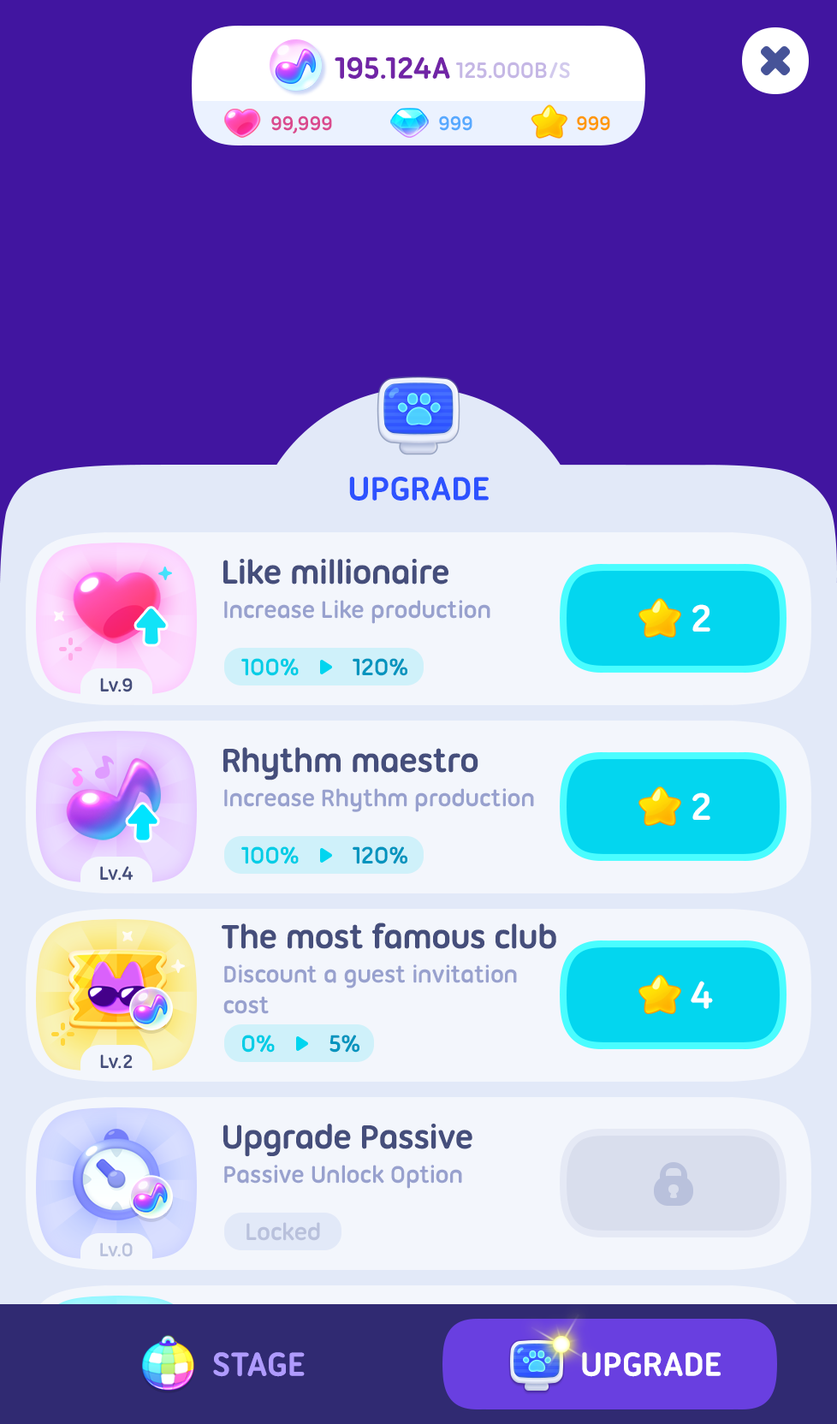
<style>
.page{position:relative;width:837px;height:1424px;background:#f3f6fc}
.page>*{position:absolute;margin:0}
.t1{font:36px "UbuntuTitling-Bold";letter-spacing:-0.025em;color:#2d52ff;text-transform:uppercase}
.t2{font:36px "UbuntuTitling-Bold";letter-spacing:-0.025em;color:#454e7b}
.t3{font:25.7px "UbuntuTitling-Bold";letter-spacing:-0.025em;color:#8c96c9}
.t4{font:41.1px "UbuntuTitling-Bold";letter-spacing:-0.025em;color:#ffffff}
.t5{font:25.7px "UbuntuTitling-Bold";letter-spacing:-0.025em;color:#00cde6}
.t6{font:25.7px "UbuntuTitling-Bold";letter-spacing:-0.025em;color:#0094be}
.t7{font:20.5px "UbuntuTitling-Bold";letter-spacing:-0.025em;color:#454e7b}
.t8{font:25.7px "UbuntuTitling-Bold";letter-spacing:-0.025em;color:#b9c1dc}
.t9{font:20.5px "UbuntuTitling-Bold";letter-spacing:-0.025em;color:#b9c1dc}
</style>
<div class="page">
<p class="t1" style="left:349px;top:477px;width:140px;height:24px">Upgrade</p>
<p class="t2" style="left:223px;top:558px;width:226px;height:27px">Like millionaire</p>
<p class="t3" style="left:224px;top:600px;width:266px;height:24px;opacity:0.9">Increase Like production</p>
<p class="t4" style="left:692px;top:604px;width:18px;height:28px">2</p>
<p class="t5" style="left:241px;top:658px;width:58px;height:18px">100%</p>
<p class="t6" style="left:353px;top:658px;width:54px;height:18px">120%</p>
<p class="t7" style="left:100px;top:678px;width:33px;height:14px">Lv.9</p>
<p class="t2" style="left:223px;top:747px;width:256px;height:34px">Rhythm maestro</p>
<p class="t3" style="left:224px;top:788px;width:310px;height:24px;opacity:0.9">Increase Rhythm production</p>
<p class="t4" style="left:692px;top:793px;width:18px;height:27px">2</p>
<p class="t5" style="left:241px;top:847px;width:58px;height:18px">100%</p>
<p class="t6" style="left:353px;top:847px;width:54px;height:18px">120%</p>
<p class="t7" style="left:100px;top:866px;width:34px;height:15px">Lv.4</p>
<p class="t2" style="left:222px;top:923px;width:334px;height:26px">The most famous club</p>
<p class="t3" style="left:223px;top:965px;width:294px;height:49px;opacity:0.9">Discount a guest invitation <br>cost</p>
<p class="t4" style="left:691px;top:981px;width:22px;height:28px">4</p>
<p class="t5" style="left:242px;top:1035px;width:33px;height:18px">0%</p>
<p class="t6" style="left:330px;top:1035px;width:30px;height:18px">5%</p>
<p class="t7" style="left:100px;top:1055px;width:33px;height:14px">Lv.2</p>
<p class="t2" style="left:223px;top:1123px;width:250px;height:34px">Upgrade Passive</p>
<p class="t3" style="left:224px;top:1165px;width:238px;height:24px;opacity:0.9">Passive Unlock Option</p>
<p class="t8" style="left:247px;top:1222px;width:73px;height:19px">Locked</p>
<p class="t9" style="left:100px;top:1243px;width:33px;height:14px">Lv.0</p>
</div>
